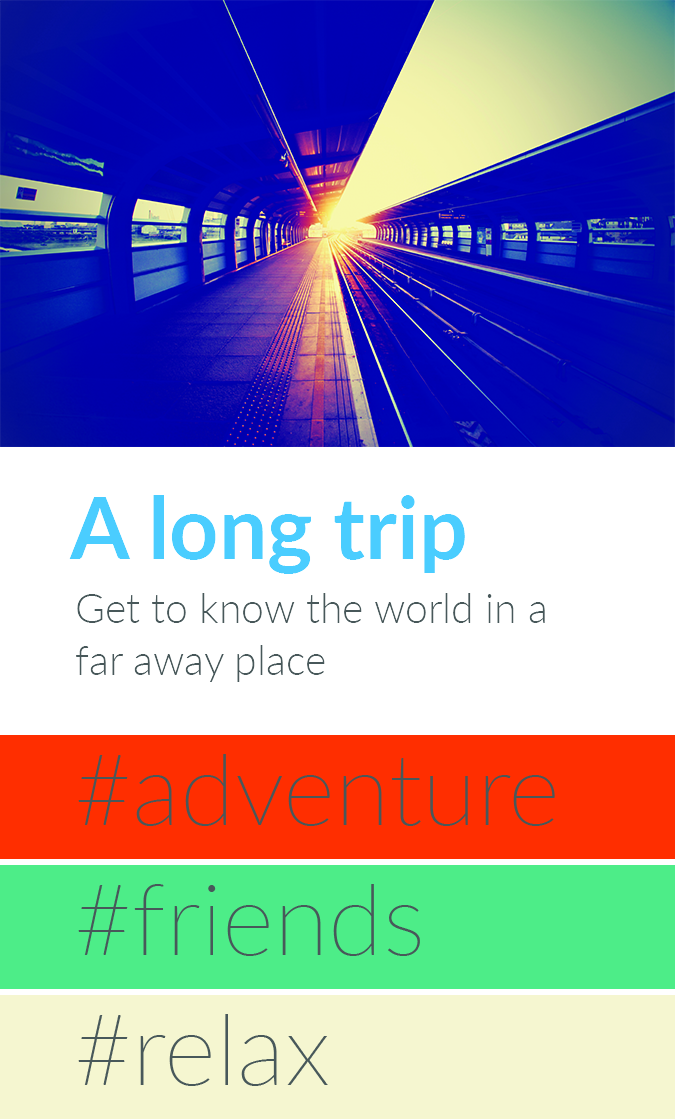
<style>
.page{position:relative;width:675px;height:1119px;background:#ffffff}
.page>*{position:absolute;margin:0}
.t1{font:86px "Lato-Bold";color:#4acdff}
.t2{font:41px/52px "Lato-Light";color:#48585a}
</style>
<div class="page">
<p class="t1" style="left:69px;top:495px;width:396px;height:79px">A long trip</p>
<p class="t2" style="left:76px;top:593px;width:469px;height:89px;text-align:right">Get to know the world in a  far away place</p>
</div>
